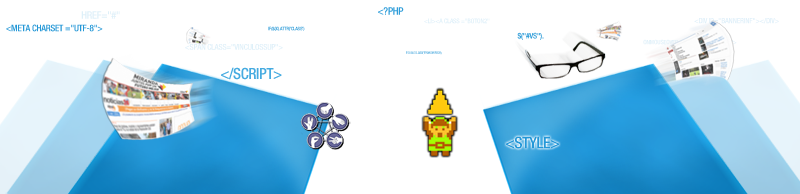
<style>
.page{position:relative;width:800px;height:194px;background:#ffffff}
.page>*{position:absolute;margin:0}
.t1{font:10.3px "Helvetica67-CondensedMedium";letter-spacing:-0.025em;color:#def0f9;text-transform:uppercase}
.t2{font:10.3px "Helvetica67-CondensedMedium";letter-spacing:-0.025em;color:#2f9dd9;text-transform:uppercase}
.t3{font:9.1px "Helvetica67-CondensedMedium";letter-spacing:-0.025em;color:#2497d6;text-transform:uppercase}
.t4{font:4.7px "Helvetica67-CondensedMedium";letter-spacing:-0.025em;text-transform:uppercase}
.t5{font:6.5px "Helvetica67-CondensedMedium";letter-spacing:-0.025em;text-transform:uppercase}
.t6{font:7.4px "Helvetica67-CondensedMedium";letter-spacing:-0.025em;color:#def0f9;text-transform:uppercase}
.t7{font:7.8px "Helvetica67-CondensedMedium";letter-spacing:-0.025em;text-transform:uppercase}
.t8{font:8px "Helvetica67-CondensedMedium";letter-spacing:-0.025em;color:#def0f9;text-transform:uppercase}
.t9{font:3.1px "Helvetica67-CondensedMedium";letter-spacing:-0.025em;text-transform:uppercase}
.t10{font:15.4px "Helvetica67-CondensedMedium";letter-spacing:-0.025em;color:#46abe0;text-transform:uppercase}
.t11{font:15.9px "Helvetica67-CondensedMedium";letter-spacing:-0.025em;color:#2397d8;text-transform:uppercase}
</style>
<div class="page">
<p class="t1" style="left:81px;top:11px;width:39px;height:8px">href="#"</p>
<p class="t2" style="left:378px;top:7px;width:26px;height:8px">&lt;?php</p>
<p class="t3" style="left:6px;top:24px;width:97px;height:8px">&lt;meta charset ="UTF-8"&gt;</p>
<p class="t4" style="left:268px;top:26px;width:37px;height:5px">if($(x).attr('class')</p>
<p class="t5" style="left:424px;top:18px;width:66px;height:6px">&lt;li&gt;&lt;a class ="boton2"</p>
<p class="t6" style="left:694px;top:18px;width:85px;height:6px">&lt;div id="bannerinf"&gt;&lt;/div&gt;</p>
<p class="t7" style="left:517px;top:32px;width:27px;height:8px">$("#vs").</p>
<p class="t8" style="left:185px;top:44px;width:98px;height:6px">&lt;span class="vinculossup"&gt;</p>
<p class="t9" style="left:406px;top:51px;width:36px;height:4px">toggleClass('transmove2');</p>
<p class="t10" style="left:221px;top:67px;width:61px;height:13px">&lt;/script&gt;</p>
<p class="t11" style="left:506px;top:136px;width:53px;height:13px">&lt;style&gt;</p>
</div>
